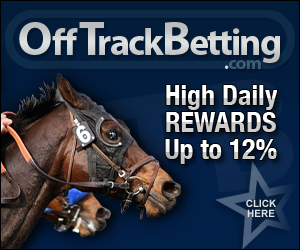
<style>
.page{position:relative;width:300px;height:250px}
.page>*{position:absolute;margin:0}
.t1{font:38.1px "MyriadPro-Bold";letter-spacing:-0.05em;color:#e0e2e2}
.t2{font:47.6px "MyriadPro-Bold";color:#e0e2e2}
.t3{font:38.1px "MyriadPro-Bold";letter-spacing:0.05em;color:#e0e2e2}
.t4{font:47.6px "MyriadPro-Bold";letter-spacing:-0.15em;color:#e0e2e2}
.t5{font:47.6px "MyriadPro-Bold";letter-spacing:-0.05em;color:#e0e2e2}
.t6{font:18.8px "MyriadPro-Bold";letter-spacing:-0.05em;color:#3e647e}
.t7{font:18.8px "MyriadPro-Bold";letter-spacing:-0.05em;color:#ffffff}
.t8{font:28px "HelveticaNeue-CondensedBold"}
.t9{font:10px/10px "Arial-BoldMT";color:#e0e2e2}
</style>
<div class="page">
<p class="t1" style="left:18px;top:15px;width:262px;height:52px"><span class="t2">O</span><span class="t3">ff</span><span class="t4">T</span>rack<span class="t5">B</span>etting</p>
<p class="t6" style="left:224px;top:53px;width:37px;height:21px"><span class="t7">.</span>com</p>
<p class="t8" style="left:165px;top:81px;width:112px;height:30px">High Daily</p>
<p class="t8" style="left:165px;top:108px;width:118px;height:30px">REWARDS</p>
<p class="t8" style="left:165px;top:135px;width:112px;height:30px">Up to 12%</p>
<p class="t9" style="left:246px;top:198px;width:30px;height:23px;text-align:center">CLICK<br>HERE</p>
</div>
